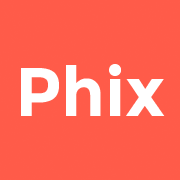
<style>
.page{position:relative;width:180px;height:180px;background:#ff5b49}
.page>*{position:absolute;margin:0}
.t1{font:68.8px "Montserrat-Bold";color:#ffffff}
</style>
<div class="page">
<p class="t1" style="left:21px;top:64px;width:144px;height:52px">Phix</p>
</div>
